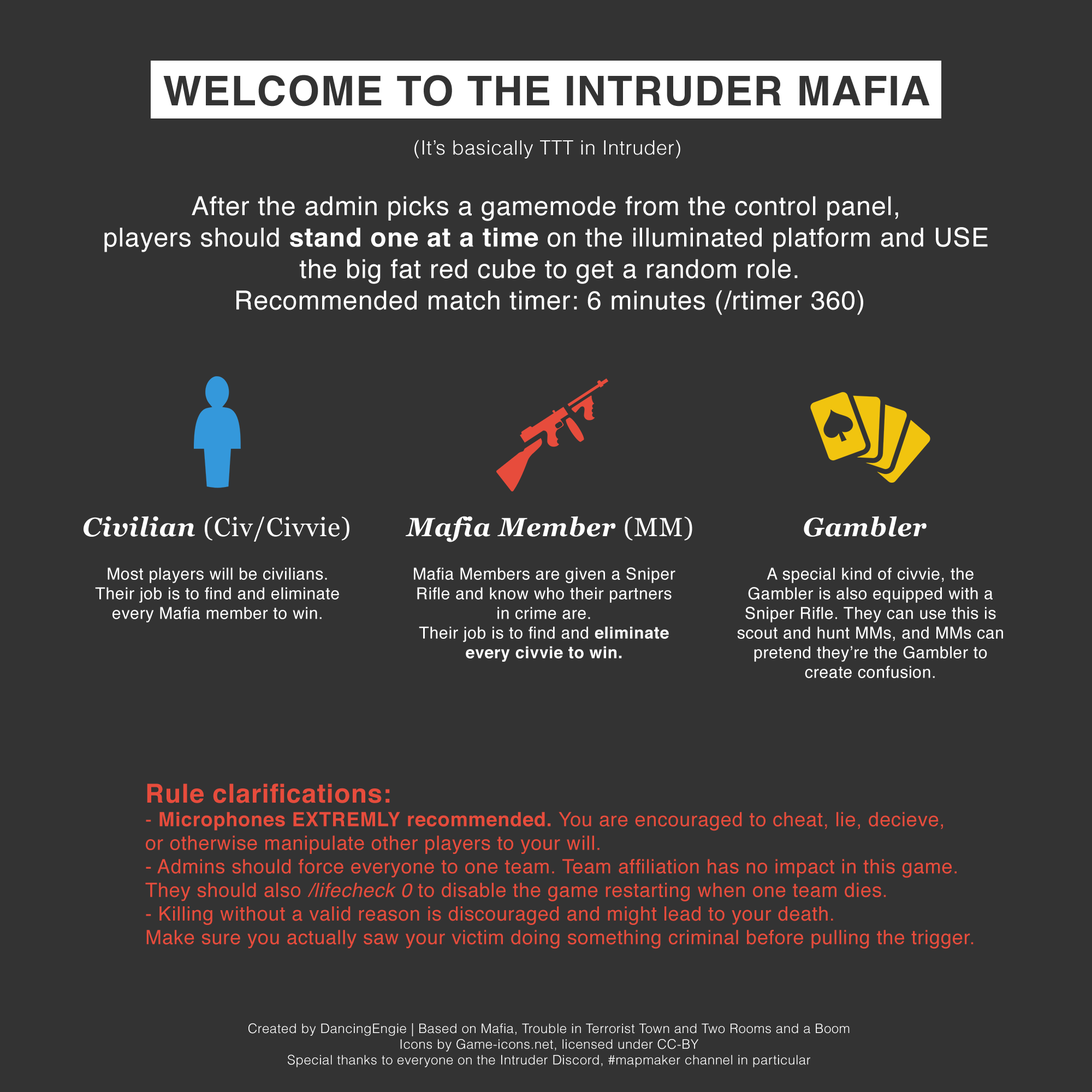
<style>
.page{position:relative;width:1092px;height:1092px;background:#333333}
.page>*{position:absolute;margin:0}
.t1{font:19.7px "Helvetica-Light";letter-spacing:0.025em;color:#ffffff}
.t2{font:26.2px "Helvetica";letter-spacing:0.025em;color:#ffffff}
.t3{font:26.2px "Helvetica-Bold";letter-spacing:0.025em;color:#ffffff}
.t4{font:26.2px "Georgia";letter-spacing:0.025em;color:#ffffff}
.t5{font:26.2px "Georgia-BoldItalic";letter-spacing:0.025em;color:#ffffff}
.t6{font:16.4px "Helvetica";letter-spacing:0.025em;color:#ffffff}
.t7{font:16.4px "Helvetica-Bold";letter-spacing:0.025em;color:#ffffff}
.t8{font:19.7px "Helvetica";letter-spacing:0.025em;color:#e74c3c}
.t9{font:26.2px "Helvetica-Bold";letter-spacing:0.025em;color:#e74c3c}
.t10{font:19.7px "Helvetica-Bold";letter-spacing:0.025em;color:#e74c3c}
.t11{font:19.7px "Helvetica-Oblique";letter-spacing:0.025em;color:#e74c3c}
.t12{font:13.1px "Helvetica-Light";letter-spacing:0.025em;color:#ffffff}
</style>
<div class="page">
<p class="t1" style="left:414px;top:140px;width:266px;height:19px">(It’s basically TTT in Intruder)</p>
<p class="t2" style="left:104px;top:196px;width:884px;height:119px;text-align:center">After the admin picks a gamemode from the control panel, <br>players should <span class="t3">stand one at a time</span> on the illuminated platform and USE <br>the big fat red cube to get a random role.<br>Recommended match timer: 6 minutes (/rtimer 360)</p>
<p class="t4" style="left:84px;top:516px;width:265px;height:26px"><span class="t5">Civilian </span>(Civ/Civvie)</p>
<p class="t5" style="left:405px;top:516px;width:287px;height:26px">Mafia Member <span class="t4">(MM)</span></p>
<p class="t5" style="left:804px;top:516px;width:123px;height:21px">Gambler</p>
<p class="t6" style="left:95px;top:567px;width:244px;height:55px;text-align:center">Most players will be civilians.<br>Their job is to find and eliminate every Mafia member to win.</p>
<p class="t6" style="left:414px;top:567px;width:261px;height:95px;text-align:center">Mafia Members are given a Sniper Rifle and know who their partners in crime are. <br>Their job is to find and <span class="t7">eliminate every civvie to win.</span></p>
<p class="t6" style="left:737px;top:567px;width:266px;height:111px;text-align:center">A special kind of civvie, the Gambler is also equipped with a Sniper Rifle. They can use this is scout and hunt MMs, and MMs can pretend they’re the Gambler to create confusion.</p>
<p class="t8" style="left:145px;top:783px;width:829px;height:166px"><span class="t9">Rule clarifications:<br></span>- <span class="t10">Microphones EXTREMLY recommended. </span>You are encouraged to cheat, lie, decieve,<br>or otherwise manipulate other players to your will.<br>- Admins should force everyone to one team. Team affiliation has no impact in this game.<br>They should also <span class="t11">/lifecheck 0</span> to disable the game restarting when one team dies.<br>- Killing without a valid reason is discouraged and might lead to your death.<br>Make sure you actually saw your victim doing something criminal before pulling the trigger.</p>
<p class="t12" style="left:248px;top:1023px;width:602px;height:44px;text-align:center">Created by DancingEngie | Based on Mafia, Trouble in Terrorist Town and Two Rooms and a Boom<br>Icons by Game-icons.net, licensed under CC-BY<br>Special thanks to everyone on the Intruder Discord, #mapmaker channel in particular</p>
</div>
